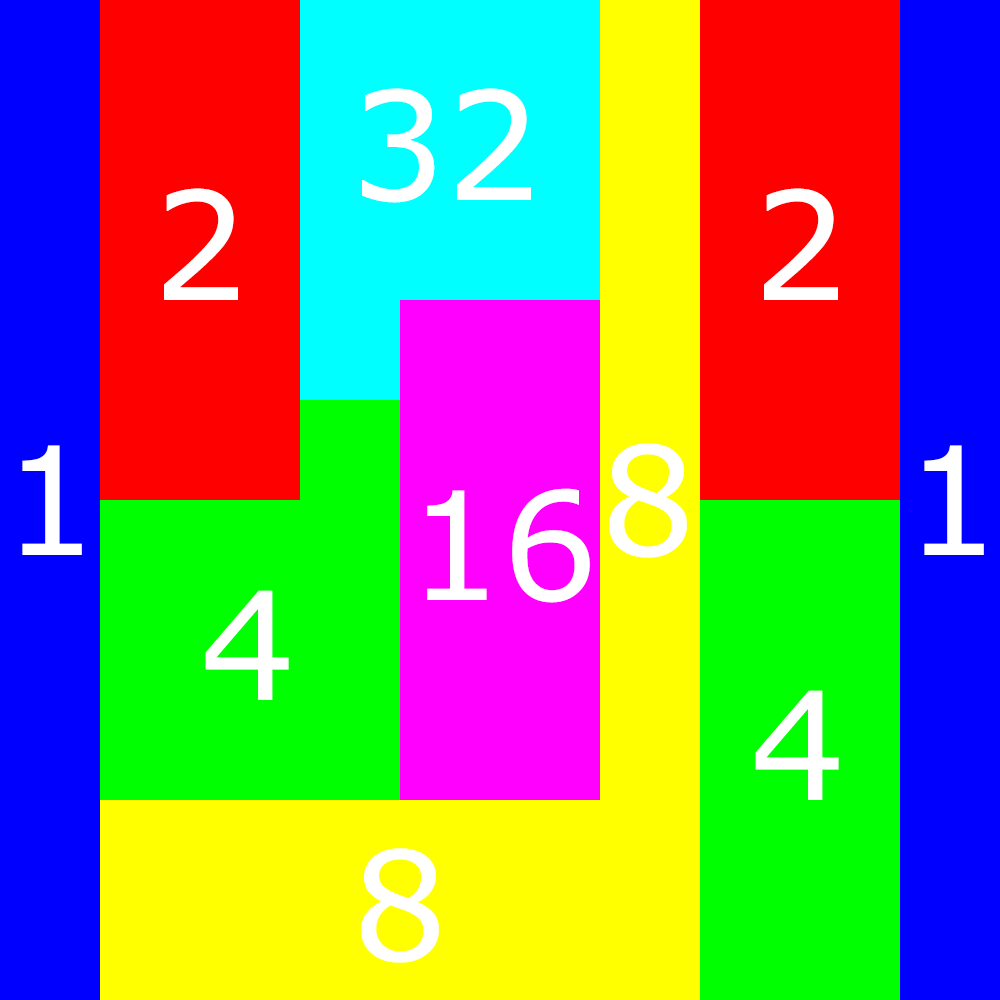
<style>
.page{position:relative;width:1000px;height:1000px;background:#ffff00}
.page>*{position:absolute;margin:0}
.t1{font:150px "MSReferenceSansSerif";color:#ffffff}
</style>
<div class="page">
<p class="t1" style="left:362px;top:88px;width:169px;height:115px;text-align:center">32<br><br>V</p>
<p class="t1" style="left:164px;top:188px;width:74px;height:112px">2</p>
<p class="t1" style="left:764px;top:188px;width:74px;height:112px">2</p>
<p class="t1" style="left:22px;top:445px;width:60px;height:110px">1</p>
<p class="t1" style="left:609px;top:443px;width:78px;height:115px;text-align:center">8<br><br>V</p>
<p class="t1" style="left:924px;top:445px;width:60px;height:110px">1</p>
<p class="t1" style="left:427px;top:488px;width:163px;height:115px;text-align:center">16<br><br>V</p>
<p class="t1" style="left:205px;top:590px;width:84px;height:110px;text-align:center">4<br>V</p>
<p class="t1" style="left:755px;top:690px;width:84px;height:110px;text-align:center">4<br>V</p>
<p class="t1" style="left:361px;top:848px;width:78px;height:115px;text-align:center">8<br><br>V</p>
</div>
